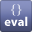
<style>
.page{position:relative;width:32px;height:32px}
.page>*{position:absolute;margin:0}
.t1{font:12.7px "Times-Roman";color:#ffffff}
.t2{font:12.7px "MyriadPro-Bold";color:#ffffff}
</style>
<div class="page">
<p class="t1" style="left:11px;top:4px;width:11px;height:12px">{}</p>
<p class="t2" style="left:4px;top:16px;width:24px;height:10px">eval</p>
</div>
